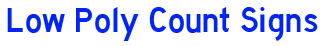
<style>
.page{position:relative;width:334px;height:46px;background:#ffffff}
.page>*{position:absolute;margin:0}
.t1{font:36px "HighwayGothic";color:#0124fb}
</style>
<div class="page">
<p class="t1" style="left:7px;top:7px;width:311px;height:34px">Low Poly Count Signs</p>
</div>
